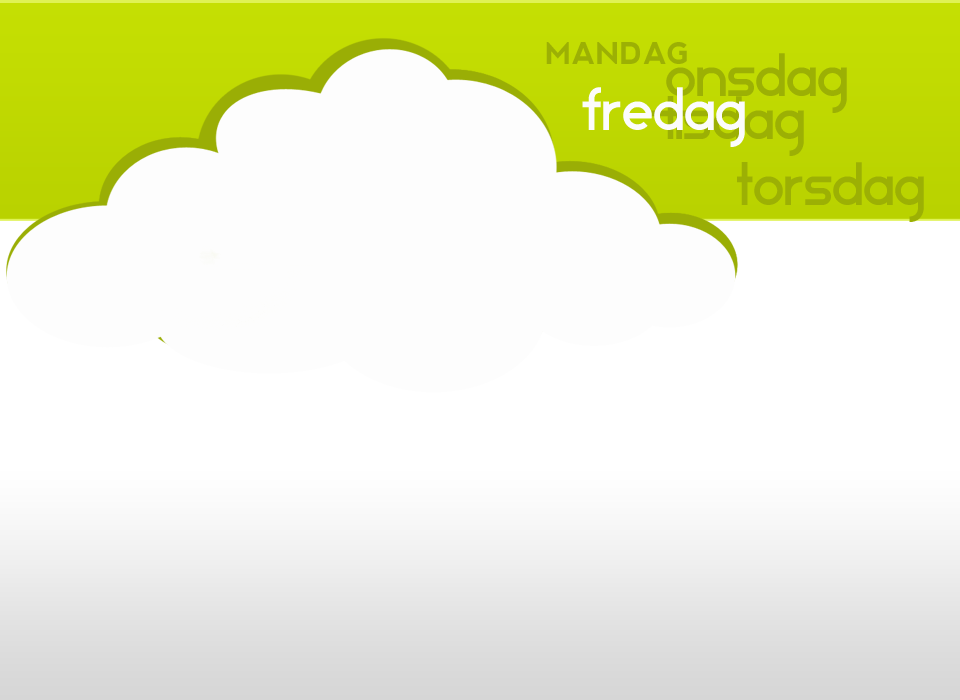
<style>
.page{position:relative;width:960px;height:700px;background:#fdfdfd}
.page>*{position:absolute;margin:0}
.t1{font:30px "nevis-Bold";color:#9cb004}
.t2{font:50px "StarAvenue";color:#9cb004}
.t3{font:50px "StarAvenue";color:#fcfcfc}
</style>
<div class="page">
<p class="t1" style="left:546px;top:42px;width:141px;height:22px">MANDAG</p>
<p class="t2" style="left:666px;top:53px;width:181px;height:60px">onsdag</p>
<p class="t3" style="left:582px;top:87px;width:163px;height:60px">Fredag</p>
<p class="t2" style="left:651px;top:96px;width:153px;height:60px">Tisdag</p>
<p class="t2" style="left:737px;top:162px;width:187px;height:60px">torsdag</p>
</div>
